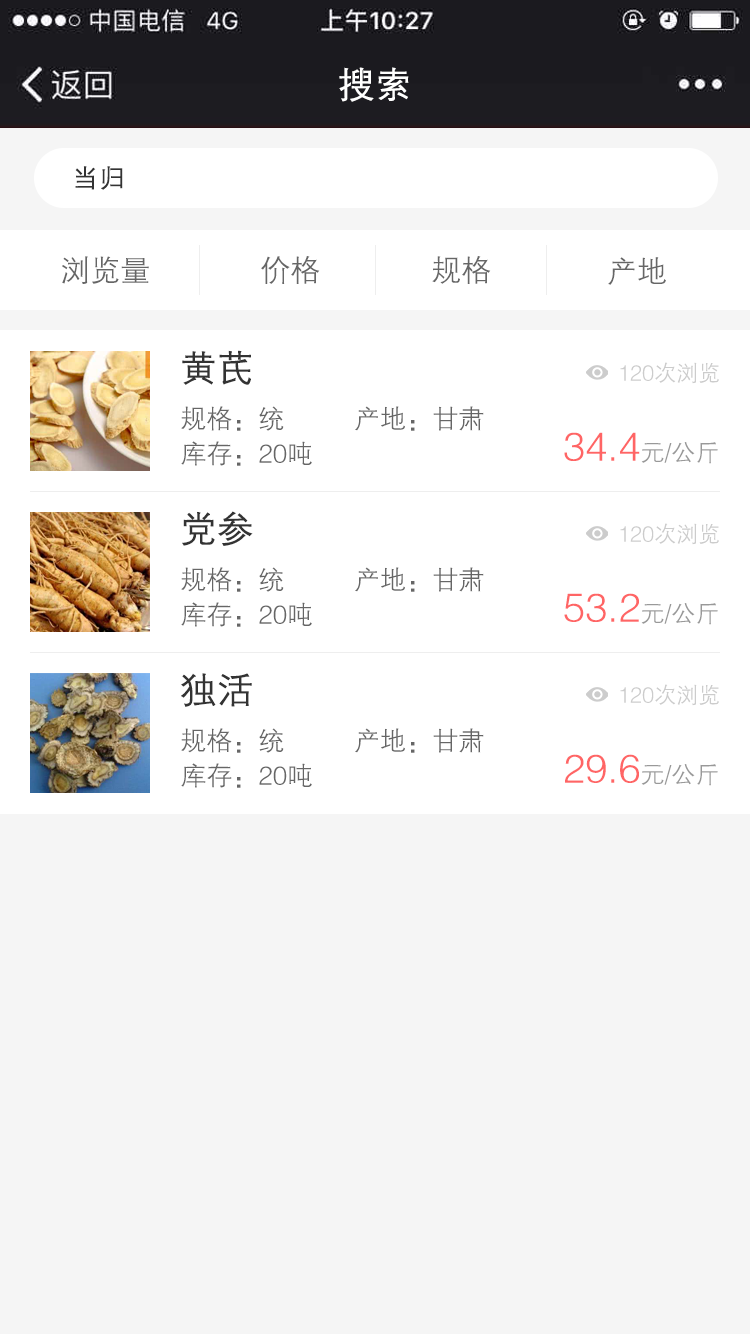
<style>
.page{position:relative;width:750px;height:1334px;background:#f5f5f5}
.page>*{position:absolute;margin:0}
.t1{font:36px "FZZDXJW--GB1-0";color:#ffffff;font-weight:bold}
.t2{font:26px "FZZDXJW--GB1-0";color:#333333;font-weight:bold}
.t3{font:30px "FZZDXJW--GB1-0";color:#666666}
.t4{font:36px "FZZDXJW--GB1-0";color:#333333;font-weight:bold}
.t5{font:22px "FZZDXJW--GB1-0";color:#cccccc}
.t6{font:26px "FZZDXJW--GB1-0";color:#666666}
.t7{font:40px "FZZDXJW--GB1-0";color:#ff6565}
.t8{font:24px "FZZDXJW--GB1-0";color:#999999}
</style>
<div class="page">
<p class="t1" style="left:339px;top:67px;width:70px;height:35px">搜索</p>
<p class="t2" style="left:75px;top:166px;width:48px;height:24px">当归</p>
<p class="t3" style="left:62px;top:256px;width:87px;height:28px">浏览量</p>
<p class="t3" style="left:261px;top:256px;width:59px;height:28px">价格</p>
<p class="t3" style="left:432px;top:256px;width:59px;height:28px">规格</p>
<p class="t3" style="left:608px;top:257px;width:58px;height:28px">产地</p>
<p class="t4" style="left:182px;top:350px;width:69px;height:35px">黄芪</p>
<p class="t5" style="left:620px;top:362px;width:99px;height:22px">120次浏览</p>
<p class="t6" style="left:181px;top:406px;width:103px;height:25px">规格：统</p>
<p class="t6" style="left:355px;top:406px;width:129px;height:25px">产地：甘肃</p>
<p class="t7" style="left:564px;top:432px;width:154px;height:32px">34.4<span class="t8">元/公斤</span></p>
<p class="t6" style="left:181px;top:441px;width:131px;height:25px">库存：20吨</p>
<p class="t4" style="left:182px;top:511px;width:71px;height:35px">党参</p>
<p class="t5" style="left:620px;top:523px;width:99px;height:22px">120次浏览</p>
<p class="t6" style="left:181px;top:567px;width:103px;height:25px">规格：统</p>
<p class="t6" style="left:355px;top:567px;width:129px;height:25px">产地：甘肃</p>
<p class="t7" style="left:564px;top:593px;width:154px;height:32px">53.2<span class="t8">元/公斤</span></p>
<p class="t6" style="left:181px;top:602px;width:131px;height:25px">库存：20吨</p>
<p class="t4" style="left:181px;top:673px;width:71px;height:34px">独活</p>
<p class="t5" style="left:620px;top:684px;width:99px;height:22px">120次浏览</p>
<p class="t6" style="left:181px;top:728px;width:103px;height:25px">规格：统</p>
<p class="t6" style="left:355px;top:728px;width:129px;height:25px">产地：甘肃</p>
<p class="t7" style="left:565px;top:754px;width:153px;height:32px">29.6<span class="t8">元/公斤</span></p>
<p class="t6" style="left:181px;top:763px;width:131px;height:25px">库存：20吨</p>
</div>
